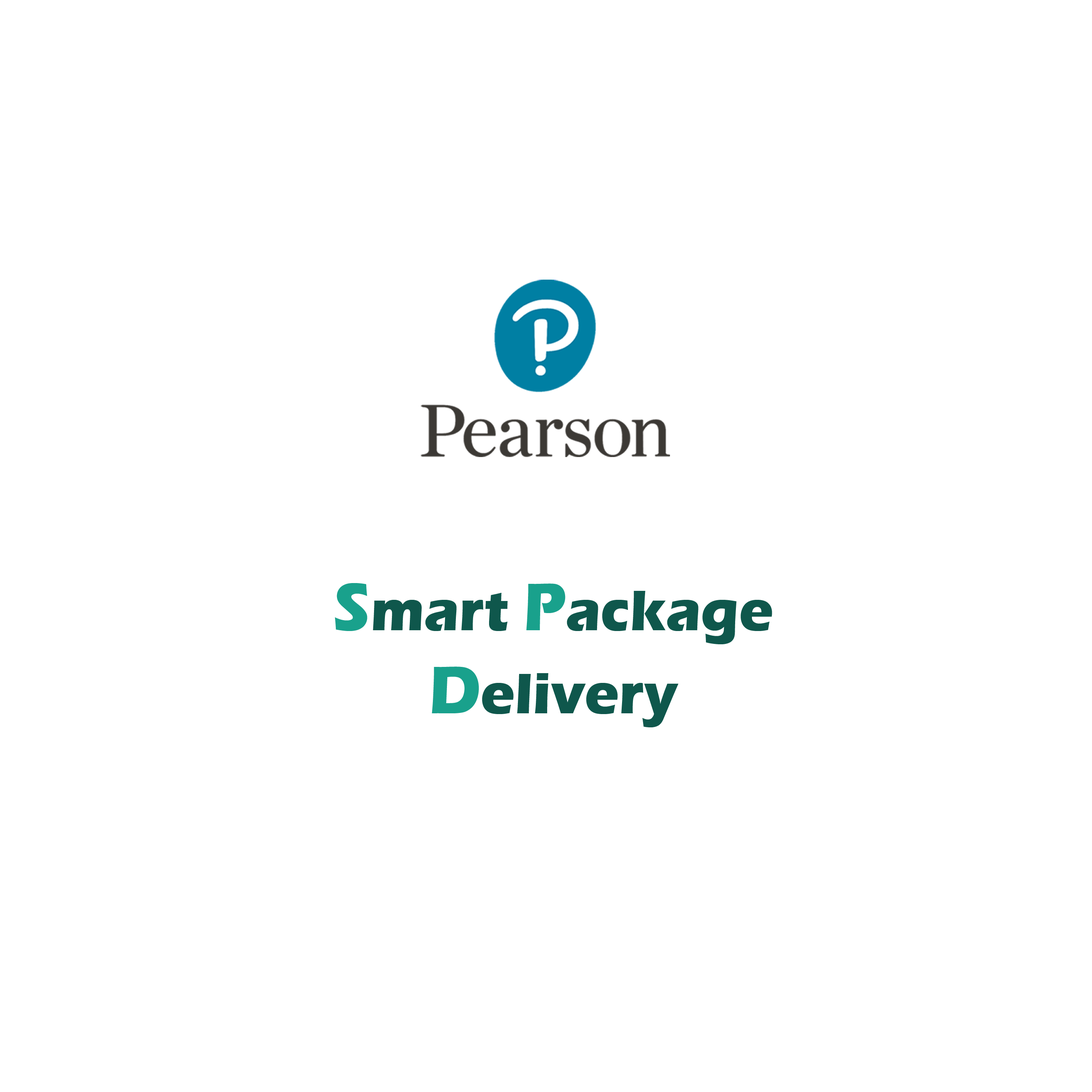
<style>
.page{position:relative;width:1092px;height:1092px;background:#ffffff}
.page>*{position:absolute;margin:0}
.t1{font:59.3px "ErasITC-Bold";color:#0f574c}
.t2{font:69.2px "ErasITC-Bold";color:#19a18c}
</style>
<div class="page">
<p class="t1" style="left:335px;top:583px;width:437px;height:144px;text-align:center"><span class="t2">S</span>mart <span class="t2">P</span>ackage<br><span class="t2">D</span>elivery</p>
</div>
